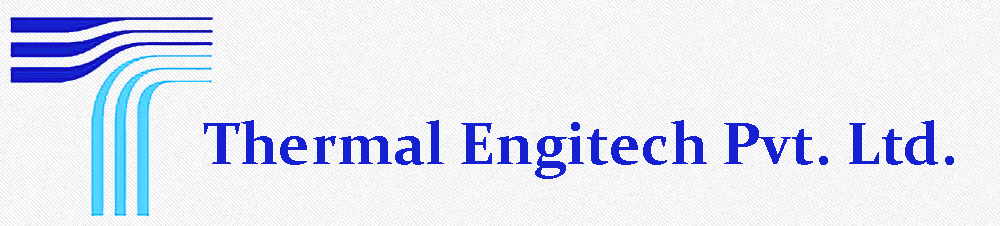
<style>
.page{position:relative;width:1000px;height:226px}
.page>*{position:absolute;margin:0}
.t1{font:60px "Constantia-Bold";color:#1520d0}
</style>
<div class="page">
<p class="t1" style="left:203px;top:120px;width:751px;height:59px">Thermal Engitech Pvt. Ltd.</p>
</div>
